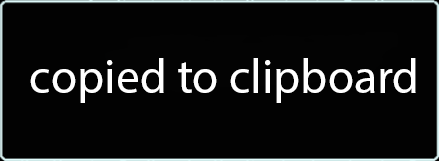
<style>
.page{position:relative;width:439px;height:161px;background:#020202}
.page>*{position:absolute;margin:0}
.t1{font:48px "MyriadPro-Regular";color:#ffffff}
</style>
<div class="page">
<p class="t1" style="left:30px;top:58px;width:386px;height:45px">copied to clipboard</p>
</div>
